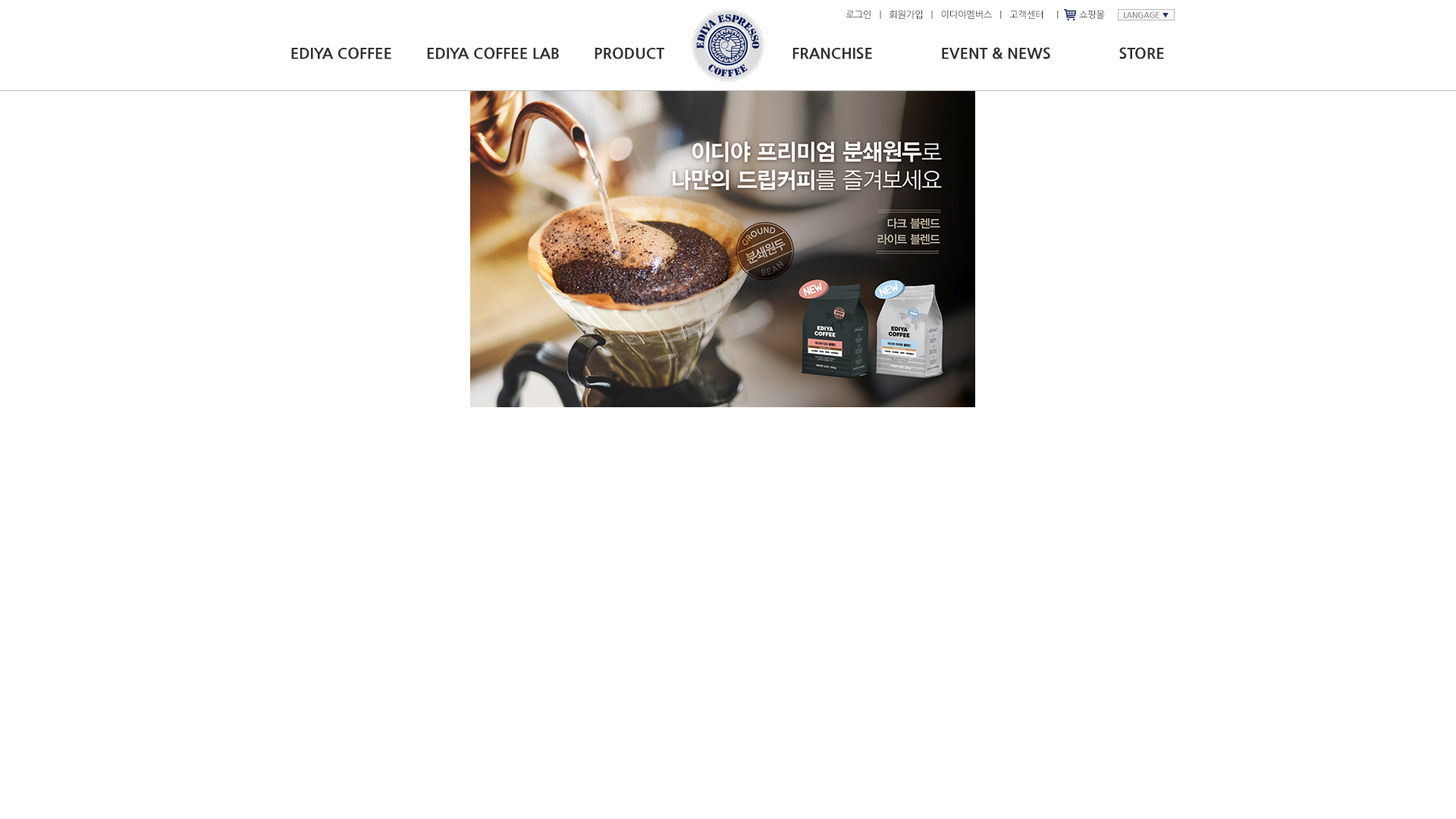
<style>
.page{position:relative;width:1456px;height:819px;background:#ffffff}
.page>*{position:absolute;margin:0}
.t1{font:9.1px "NanumGothic";color:#333333}
.t2{font:7.6px "NanumGothic";color:#333333}
.t3{font:7.6px "NanumGothic";color:#1d326c}
.t4{font:15.2px "NanumGothicExtraBold";color:#333333}
</style>
<div class="page">
<p class="t1" style="left:846px;top:10px;width:259px;height:9px">로그인   |   회원가입   |   이디야멤버스   |   고객센터     |        쇼핑몰</p>
<p class="t2" style="left:1124px;top:12px;width:45px;height:6px">LANGAGE <span class="t3">▼</span></p>
<p class="t4" style="left:291px;top:47px;width:873px;height:12px">EDIYA COFFEE        EDIYA COFFEE LAB        PRODUCT                              FRANCHISE                EVENT &amp; NEWS                STORE</p>
</div>
